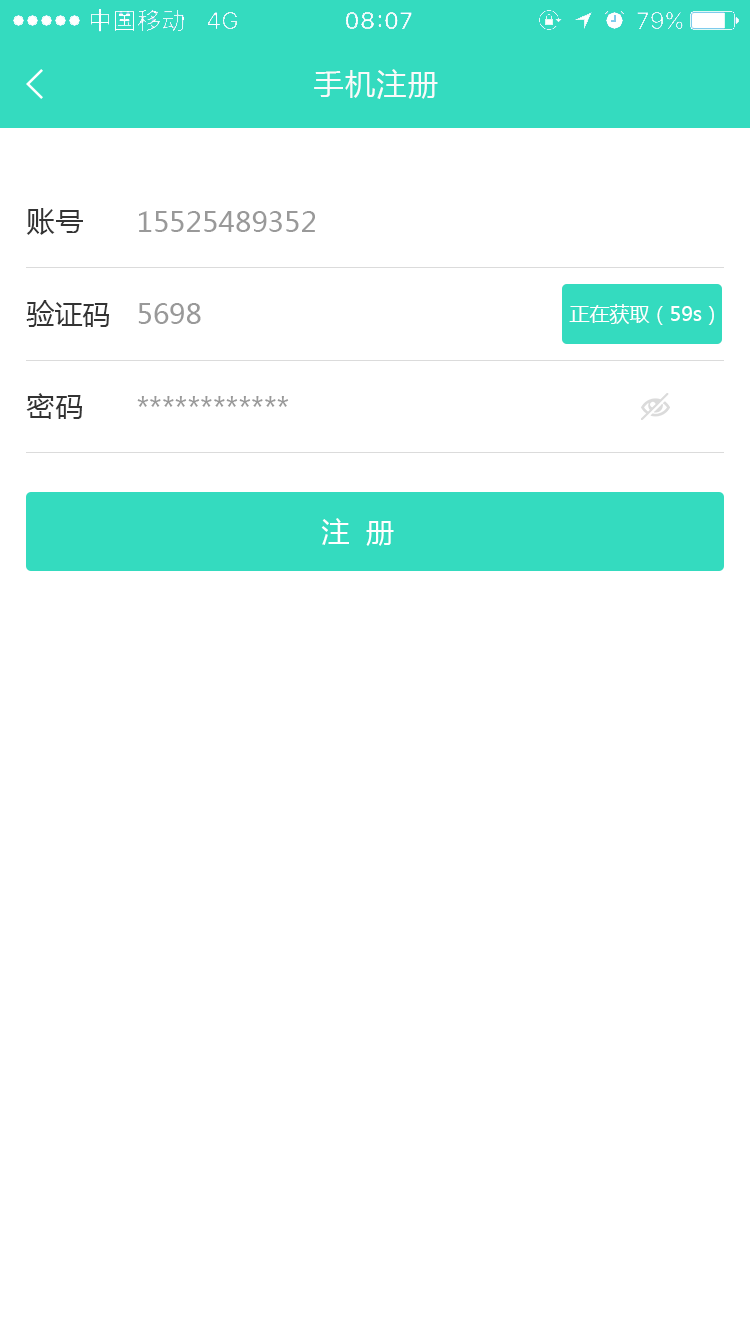
<style>
.page{position:relative;width:750px;height:1334px;background:#ffffff}
.page>*{position:absolute;margin:0}
.t1{font:30px "MicrosoftYaHei";letter-spacing:0.05em;color:#fafafa}
.t2{font:28px "MicrosoftYaHei";letter-spacing:0.05em;color:#333333}
.t3{font:28px "MicrosoftYaHei";color:#999999}
.t4{font:28px "MicrosoftYaHei";color:#333333}
.t5{font:20px "MicrosoftYaHei";color:#ffffff}
.t6{font:28px "MicrosoftYaHei";color:#ffffff}
</style>
<div class="page">
<p class="t1" style="left:314px;top:69px;width:124px;height:30px">手机注册</p>
<p class="t2" style="left:26px;top:208px;width:57px;height:27px">账号</p>
<p class="t3" style="left:139px;top:211px;width:176px;height:21px">15525489352</p>
<p class="t4" style="left:26px;top:300px;width:83px;height:27px">验证码</p>
<p class="t3" style="left:138px;top:303px;width:63px;height:21px">5698</p>
<p class="t5" style="left:569px;top:304px;width:145px;height:21px">正在获取（59s）</p>
<p class="t2" style="left:26px;top:393px;width:56px;height:26px">密码</p>
<p class="t3" style="left:137px;top:396px;width:152px;height:11px">************</p>
<p class="t6" style="left:321px;top:518px;width:73px;height:28px">注  册</p>
</div>
